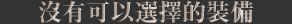
<style>
.page{position:relative;width:292px;height:24px;background:#333333}
.page>*{position:absolute;margin:0}
.t1{font:24px "RyuminPr6N-ExBold"}
</style>
<div class="page">
<p class="t1" style="left:39px;top:0px;width:215px;height:24px">沒有可以選擇的裝備</p>
</div>
